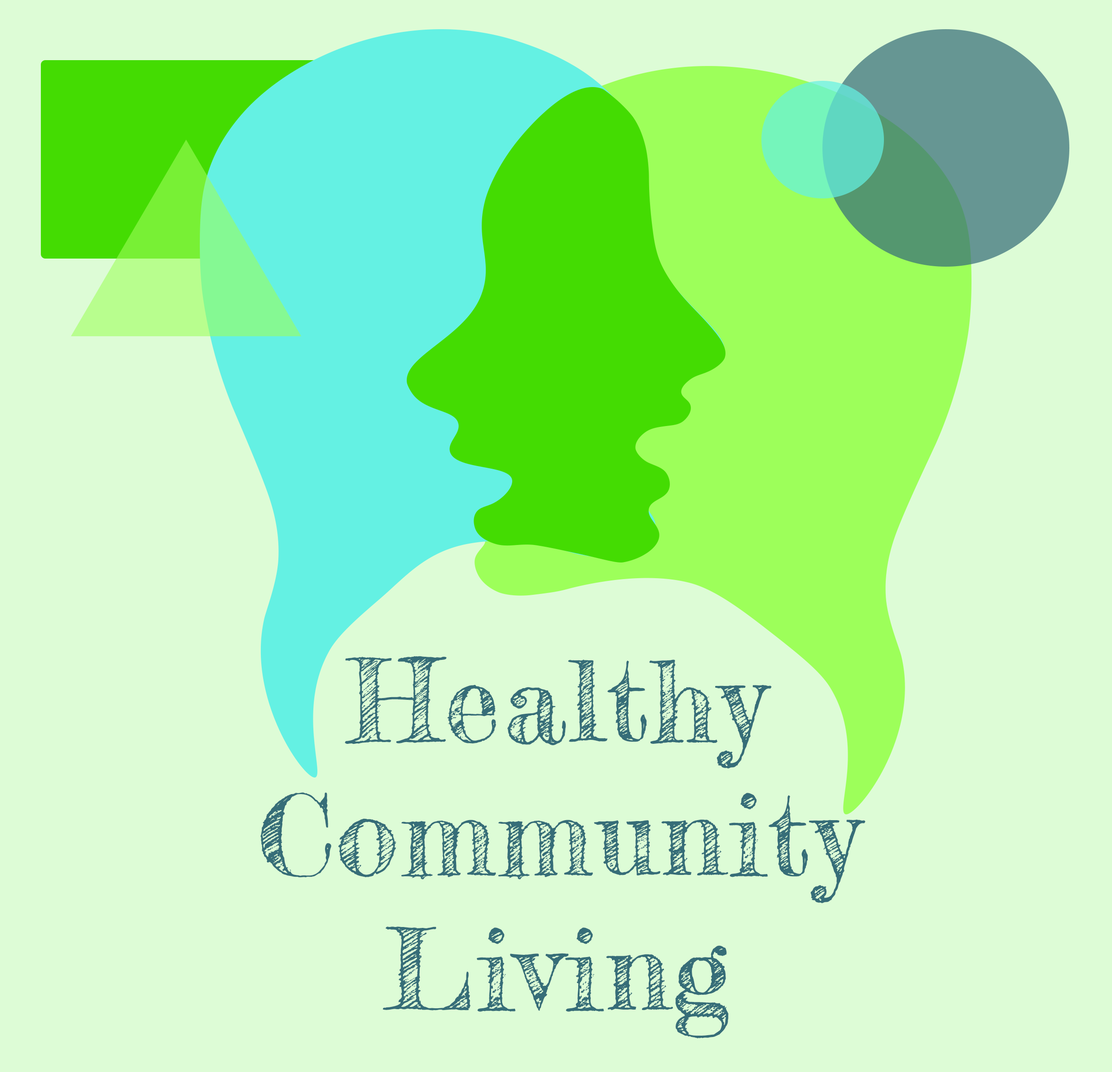
<style>
.page{position:relative;width:1112px;height:1072px;background:#ddfcd6}
.page>*{position:absolute;margin:0}
.t1{font:112.2px "FrederickatheGreat-Regular";letter-spacing:0.025em;color:#366d78}
</style>
<div class="page">
<p class="t1" style="left:260px;top:656px;width:606px;height:383px;text-align:center">Healthy<br> Community <br>Living</p>
</div>
